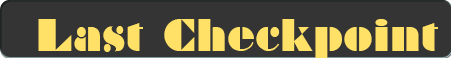
<style>
.page{position:relative;width:451px;height:58px;background:#343434}
.page>*{position:absolute;margin:0}
.t1{font:72.5px "Braggadocio";letter-spacing:0.01em;color:#ffe168;scale:0.9 1}
</style>
<div class="page">
<p class="t1" style="left:38px;top:19px;width:400px;height:39px">Last Checkpoint</p>
</div>
